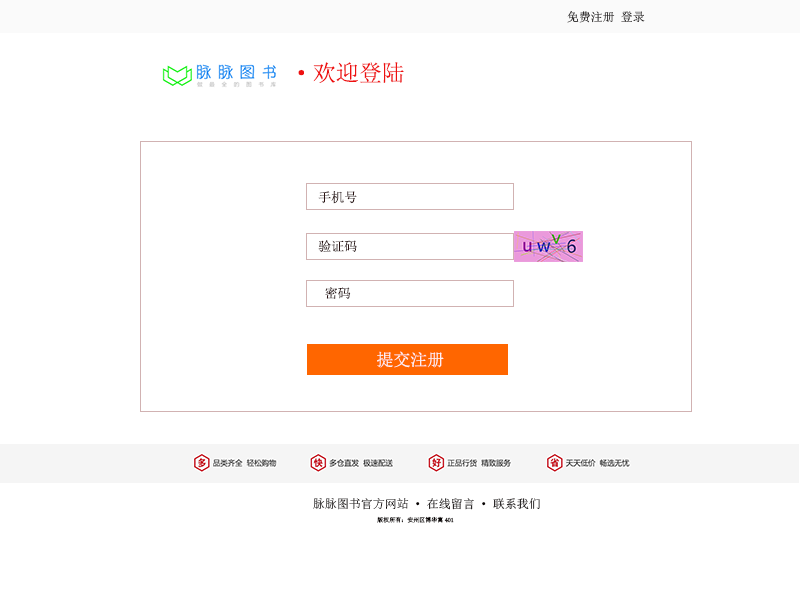
<style>
.page{position:relative;width:800px;height:600px;background:#ffffff}
.page>*{position:absolute;margin:0}
.t1{font:12px "SimSun"}
.t2{font:23px "SimSun";color:#ee1010}
.t3{font:13px "SimSun";color:#281111}
.t4{font:17px "SimSun";color:#fdf2f2}
.t5{font:12px "SimSun";color:#060202}
.t6{font:6px "SimSun";color:#060202}
</style>
<div class="page">
<p class="t1" style="left:567px;top:11px;width:78px;height:12px">免费注册 登录</p>
<p class="t2" style="left:298px;top:62px;width:106px;height:21px">·欢迎登陆</p>
<p class="t3" style="left:318px;top:191px;width:39px;height:13px">手机号</p>
<p class="t3" style="left:318px;top:240px;width:39px;height:12px">验证码</p>
<p class="t3" style="left:325px;top:287px;width:26px;height:12px">密码</p>
<p class="t4" style="left:377px;top:351px;width:67px;height:17px">提交注册</p>
<p class="t5" style="left:313px;top:498px;width:227px;height:12px">脉脉图书官方网站·在线留言·联系我们</p>
<p class="t6" style="left:377px;top:516px;width:77px;height:7px">版权所有：安州区博华寓401</p>
</div>
